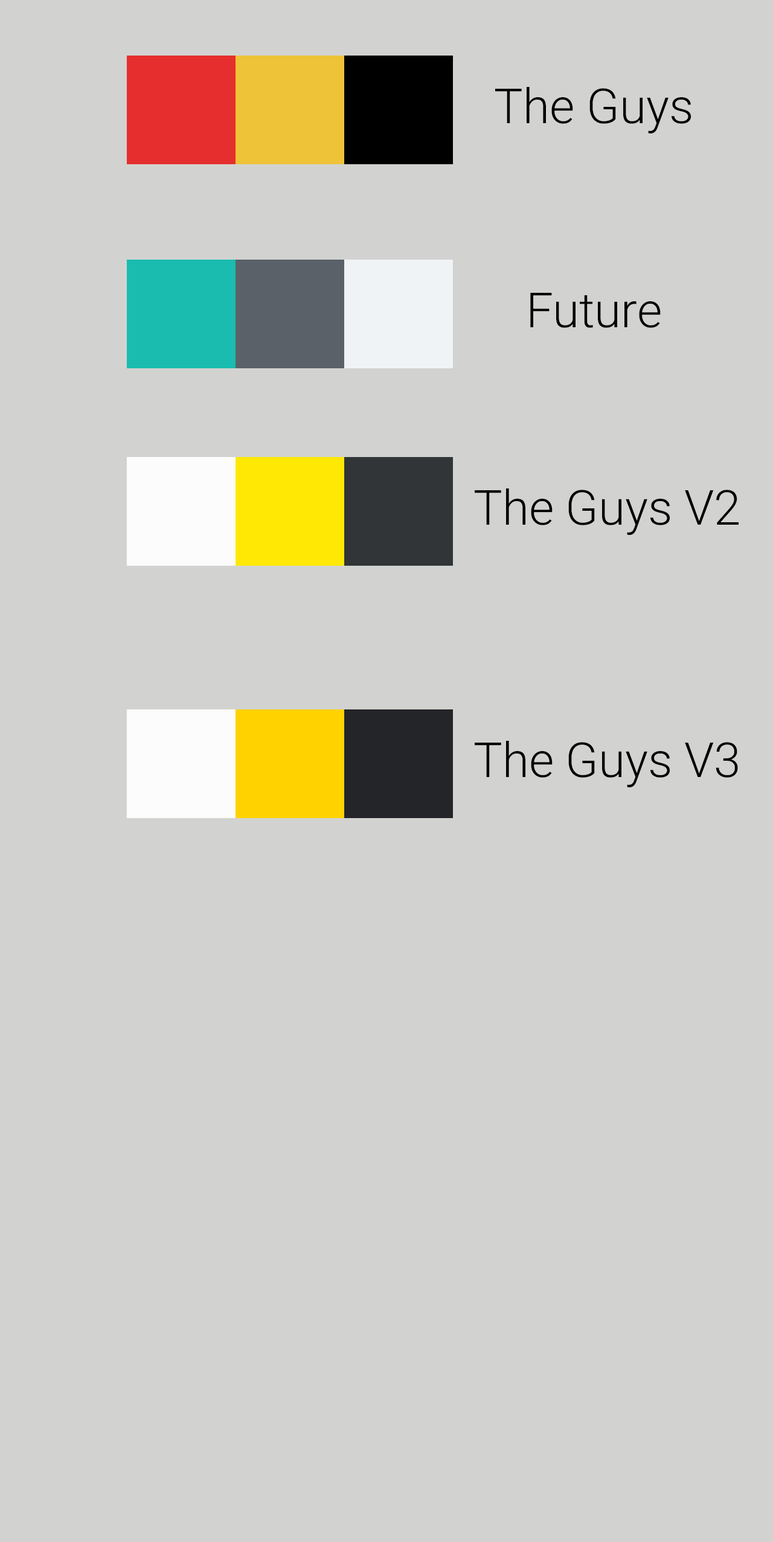
<style>
.page{position:relative;width:773px;height:1542px;background:#d2d3d0}
.page>*{position:absolute;margin:0}
.t1{font:48.3px "Roboto-Light";color:#000000}
</style>
<div class="page">
<p class="t1" style="left:495px;top:87px;width:196px;height:46px">The Guys</p>
<p class="t1" style="left:530px;top:293px;width:131px;height:35px">Future</p>
<p class="t1" style="left:475px;top:489px;width:264px;height:46px">The Guys V2</p>
<p class="t1" style="left:475px;top:741px;width:263px;height:47px">The Guys V3</p>
</div>
